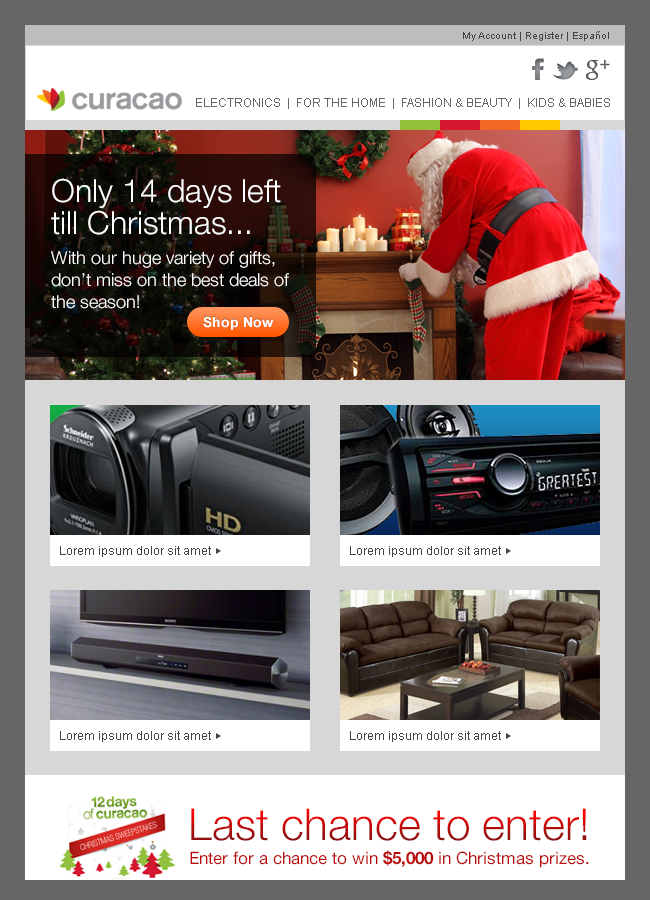
<style>
.page{position:relative;width:650px;height:900px;background:#ffffff}
.page>*{position:absolute;margin:0}
.t1{font:10px "ArialMT";color:#444444}
.t2{font:12px "ArialMT";color:#666666}
.t3{font:18px/22px "HelveticaNeue-Light";color:#ffffff}
.t4{font:32px/36px "HelveticaNeue-Light";color:#ffffff}
.t5{font:32px/32px "HelveticaNeue-Light";color:#ffffff}
.t6{font:18px/30px "HelveticaNeue-Light";color:#ffffff}
.t7{font:12px "ArialMT";color:#444444}
.t8{font:44px "HelveticaNeue-Light"}
.t9{font:17px "HelveticaNeue-Roman";color:#ba0c0c}
.t10{font:17px "HelveticaNeue-Bold";color:#ba0c0c}
</style>
<div class="page">
<p class="t1" style="left:463px;top:31px;width:146px;height:10px">My Account | Register | Español</p>
<p class="t2" style="left:196px;top:98px;width:414px;height:11px">ELECTRONICS  |  FOR THE HOME  |  FASHION &amp; BEAUTY  |  KIDS &amp; BABIES</p>
<p class="t3" style="left:51px;top:178px;width:238px;height:131px"><span class="t4">Only 14 days left<br></span><span class="t5">till Christmas...<br></span><span class="t6">With our huge variety of gifts, </span>don’t miss on the best deals of the season!</p>
<p class="t7" style="left:60px;top:546px;width:151px;height:11px">Lorem ipsum dolor sit amet</p>
<p class="t7" style="left:350px;top:546px;width:151px;height:11px">Lorem ipsum dolor sit amet</p>
<p class="t7" style="left:60px;top:731px;width:151px;height:11px">Lorem ipsum dolor sit amet</p>
<p class="t7" style="left:350px;top:731px;width:151px;height:11px">Lorem ipsum dolor sit amet</p>
<p class="t8" style="left:191px;top:808px;width:396px;height:33px">Last chance to enter!</p>
<p class="t9" style="left:190px;top:850px;width:399px;height:18px">Enter for a chance to win <span class="t10">$5,000</span> in Christmas prizes.</p>
</div>
